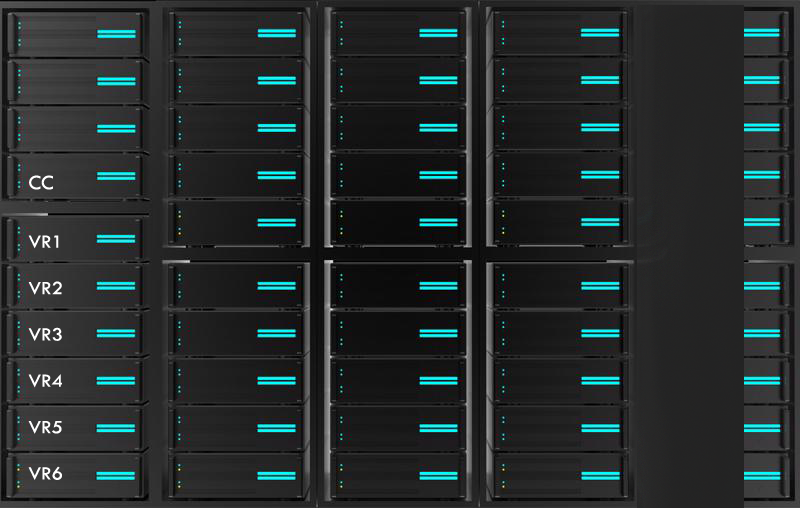
<style>
.page{position:relative;width:800px;height:508px}
.page>*{position:absolute;margin:0}
.t1{font:20.8px "TwCenMT-Regular";color:#ffffff}
.t2{font:19.3px "TwCenMT-Regular";color:#ffffff;scale:1.08 1}
</style>
<div class="page">
<p class="t1" style="left:29px;top:175px;width:24px;height:15px">CC</p>
<p class="t2" style="left:28px;top:235px;width:34px;height:245px">VR1<br><br>VR2<br><br>VR3<br><br>VR4<br><br>VR5<br><br>VR6</p>
</div>
